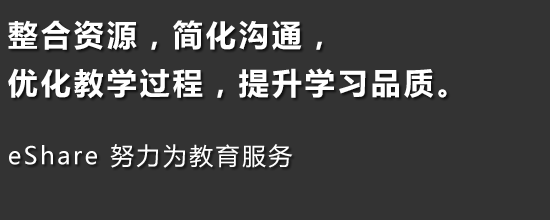
<style>
.page{position:relative;width:550px;height:220px;background:#333333}
.page>*{position:absolute;margin:0}
.t1{font:30px/48px "MicrosoftYaHei-Bold";letter-spacing:0.1em;color:#ffffff}
.t2{font:24px "MicrosoftYaHei";letter-spacing:0.1em;color:#ffffff}
</style>
<div class="page">
<p class="t1" style="left:8px;top:20px;width:439px;height:79px">整合资源，简化沟通，<br>优化教学过程，提升学习品质。</p>
<p class="t2" style="left:9px;top:144px;width:284px;height:24px">eShare 努力为教育服务</p>
</div>
